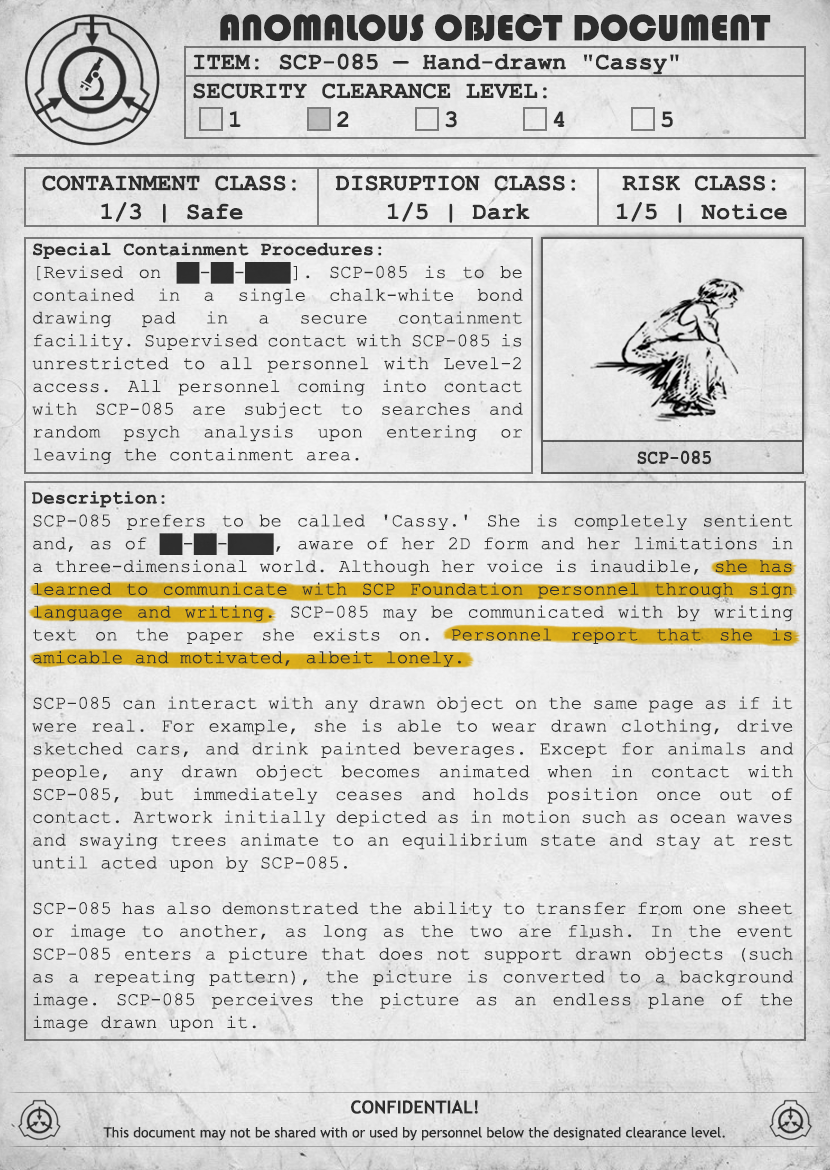
<style>
.page{position:relative;width:830px;height:1170px}
.page>*{position:absolute;margin:0}
.t1{font:38px "Bauhaus93";color:#333333;text-transform:uppercase}
.t2{font:24px "CourierNewPS-BoldMT";color:#333333}
.t3{font:24px "CourierNewPS-BoldMT";color:#333333;text-transform:uppercase}
.t4{font:19px "CourierNewPSMT";color:#333333}
.t5{font:19px "CourierNewPS-BoldMT";color:#333333}
.t6{font:20.1px "CourierNewPS-BoldMT";color:#333333;scale:0.9 1}
.t7{font:14px/24px "TrebuchetMS";color:#333333}
.t8{font:18px/24px "TrebuchetMS-Bold";color:#333333}
</style>
<div class="page">
<p class="t1" style="left:220px;top:14px;width:551px;height:27px">anomalous object document</p>
<p class="t2" style="left:193px;top:53px;width:486px;height:75px">ITEM: SCP-085 — Hand-drawn "Cassy"<br><span class="t3">Security CLEARANCE LEVEL:</span> <br> 1   2   3   4   5</p>
<p class="t2" style="left:42px;top:175px;width:254px;height:48px;text-align:center">CONTAINMENT CLASS:<br>1/3 | Safe</p>
<p class="t2" style="left:335px;top:175px;width:241px;height:48px;text-align:center">DISRUPTION CLASS:<br>1/5 | Dark</p>
<p class="t2" style="left:617px;top:175px;width:170px;height:48px;text-align:center">RISK CLASS:<br>1/5 | Notice</p>
<p class="t4" style="left:32px;top:242px;width:491px;height:222px;text-align:justify"><span class="t5">Special Containment Procedures:<br></span>[Revised on ██-██-████]. SCP-085 is to be contained in a single chalk-white bond drawing pad in a secure containment facility. Supervised contact with SCP-085 is unrestricted to all personnel with Level-2 access. All personnel coming into contact with SCP-085 are subject to searches and random psych analysis upon entering or leaving the containment area.</p>
<p class="t6" style="left:637px;top:450px;width:74px;height:15px">SCP-085</p>
<p class="t4" style="left:32px;top:491px;width:762px;height:541px;text-align:justify"><span class="t5">Description:<br></span>SCP-085 prefers to be called 'Cassy.' She is completely sentient and, as of ██-██-████, aware of her 2D form and her limitations in a three-dimensional world. Although her voice is inaudible, she has learned to communicate with SCP Foundation personnel through sign language and writing. SCP-085 may be communicated with by writing text on the paper she exists on. Personnel report that she is amicable and motivated, albeit lonely.<br><br>SCP-085 can interact with any drawn object on the same page as if it were real. For example, she is able to wear drawn clothing, drive sketched cars, and drink painted beverages. Except for animals and people, any drawn object becomes animated when in contact with SCP-085, but immediately ceases and holds position once out of contact. Artwork initially depicted as in motion such as ocean waves and swaying trees animate to an equilibrium state and stay at rest until acted upon by SCP-085.<br><br>SCP-085 has also demonstrated the ability to transfer from one sheet or image to another, as long as the two are flush. In the event SCP-085 enters a picture that does not support drawn objects (such as a repeating pattern), the picture is converted to a background image. SCP-085 perceives the picture as an endless plane of the image drawn upon it.</p>
<p class="t7" style="left:103px;top:1100px;width:622px;height:41px;text-align:center"><span class="t8">CONFIDENTIAL!<br></span>This document may not be shared with or used by personnel below the designated clearance level.</p>
</div>
